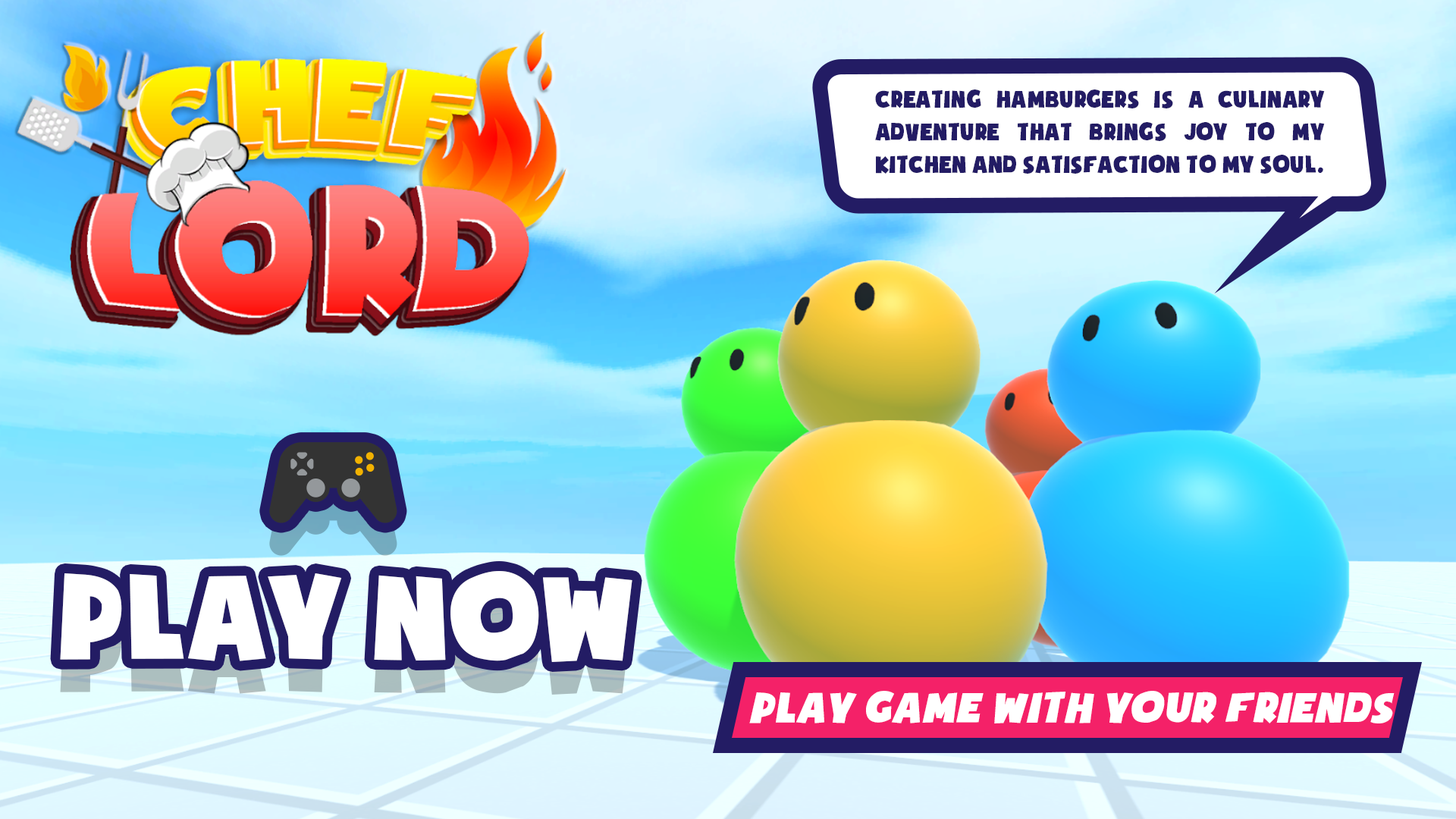
<style>
.page{position:relative;width:1456px;height:819px}
.page>*{position:absolute;margin:0}
.t1{font:27.2px "iCielSoupofJustice";color:#231c64;scale:0.96 1}
.t2{font:48.4px "iCielSoupofJustice";color:#ffffff;font-style:italic}
</style>
<div class="page">
<p class="t1" style="left:875px;top:89px;width:450px;height:85px;text-align:justify">Creating hamburgers is a culinary adventure that brings joy to my kitchen and satisfaction to my soul.</p>
<p class="t2" style="left:749px;top:691px;width:646px;height:32px">PLAY GAME WITH YOUR FRIENDS</p>
</div>
